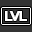
<style>
.page{position:relative;width:32px;height:32px;background:#333333}
.page>*{position:absolute;margin:0}
.t1{font:15px "Code-Bold";color:#ffffff;font-weight:bold}
</style>
<div class="page">
<p class="t1" style="left:5px;top:11px;width:22px;height:10px">LVL</p>
</div>
